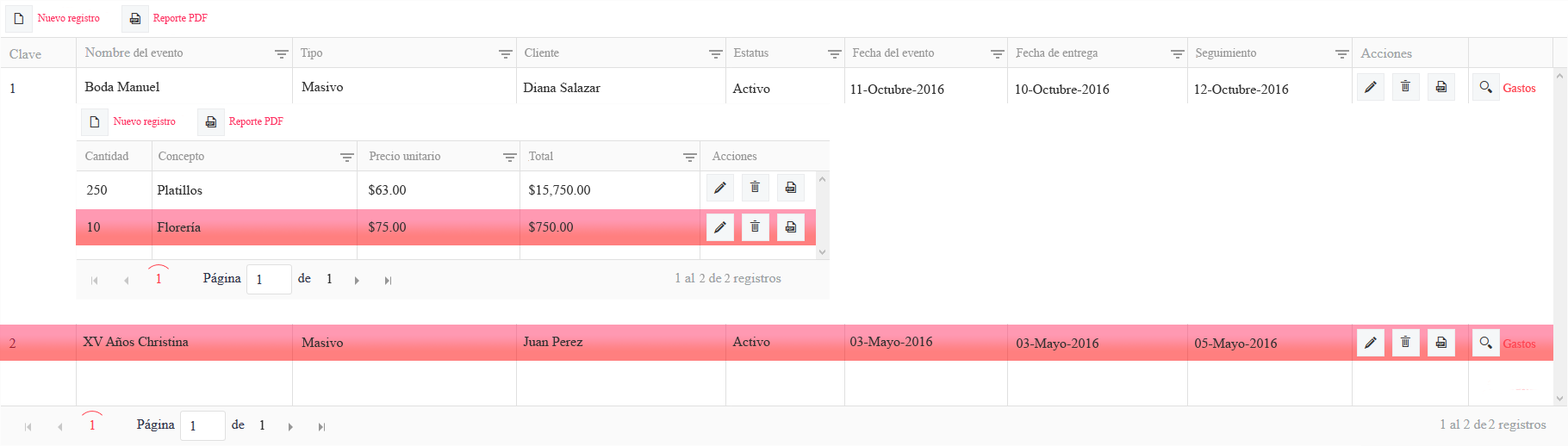
<style>
.page{position:relative;width:1568px;height:446px;background:#ffffff}
.page>*{position:absolute;margin:0}
.t1{font:10.3px "TimesNewRomanPSMT";color:#ff3366}
.t2{font:12.1px "TimesNewRomanPSMT";color:#999999}
.t3{font:13.8px "TimesNewRomanPSMT";color:#333333}
</style>
<div class="page">
<p class="t1" style="left:37px;top:14px;width:63px;height:10px">Nuevo registro</p>
<p class="t1" style="left:153px;top:14px;width:55px;height:10px">Reporte PDF</p>
<p class="t2" style="left:134px;top:48px;width:50px;height:9px">del evento</p>
<p class="t2" style="left:301px;top:48px;width:22px;height:11px">Tipo</p>
<p class="t2" style="left:525px;top:48px;width:34px;height:9px">Cliente</p>
<p class="t2" style="left:733px;top:48px;width:35px;height:9px">Estatus</p>
<p class="t2" style="left:852px;top:48px;width:83px;height:9px">Fecha del evento</p>
<p class="t2" style="left:1016px;top:48px;width:82px;height:11px">Fecha de entrega</p>
<p class="t2" style="left:1196px;top:48px;width:61px;height:11px">Seguimiento</p>
<p class="t3" style="left:84px;top:82px;width:75px;height:9px">Boda Manuel</p>
<p class="t3" style="left:302px;top:82px;width:41px;height:9px">Masivo</p>
<p class="t3" style="left:523px;top:83px;width:77px;height:9px">Diana Salazar</p>
<p class="t3" style="left:732px;top:84px;width:38px;height:9px">Activo</p>
<p class="t3" style="left:851px;top:84px;width:93px;height:10px">11-Octubre-2016</p>
<p class="t3" style="left:1016px;top:84px;width:94px;height:10px">10-Octubre-2016</p>
<p class="t3" style="left:1195px;top:84px;width:94px;height:10px">12-Octubre-2016</p>
<p class="t3" style="left:83px;top:337px;width:106px;height:9px">XV Años Christina</p>
<p class="t3" style="left:302px;top:338px;width:41px;height:9px">Masivo</p>
<p class="t3" style="left:523px;top:337px;width:60px;height:9px">Juan Perez</p>
<p class="t3" style="left:732px;top:337px;width:38px;height:9px">Activo</p>
<p class="t3" style="left:850px;top:337px;width:82px;height:12px">03-Mayo-2016</p>
<p class="t3" style="left:1017px;top:339px;width:81px;height:12px">03-Mayo-2016</p>
<p class="t3" style="left:1195px;top:339px;width:82px;height:12px">05-Mayo-2016</p>
<p class="t3" style="left:260px;top:420px;width:4px;height:10px">1</p>
</div>
